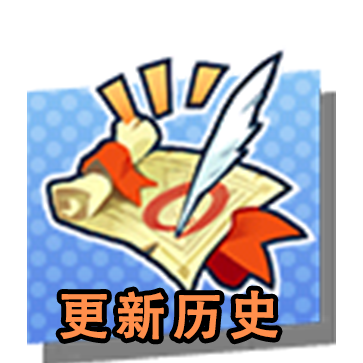
<style>
.page{position:relative;width:363px;height:363px;background:#ffffff}
.page>*{position:absolute;margin:0}
.t1{font:50.4px "AdobeHeitiStd-Regular";letter-spacing:0.1em;color:#ff8f4c;font-weight:bold}
</style>
<div class="page">
<p class="t1" style="left:60px;top:290px;width:218px;height:50px">更新历史</p>
</div>
